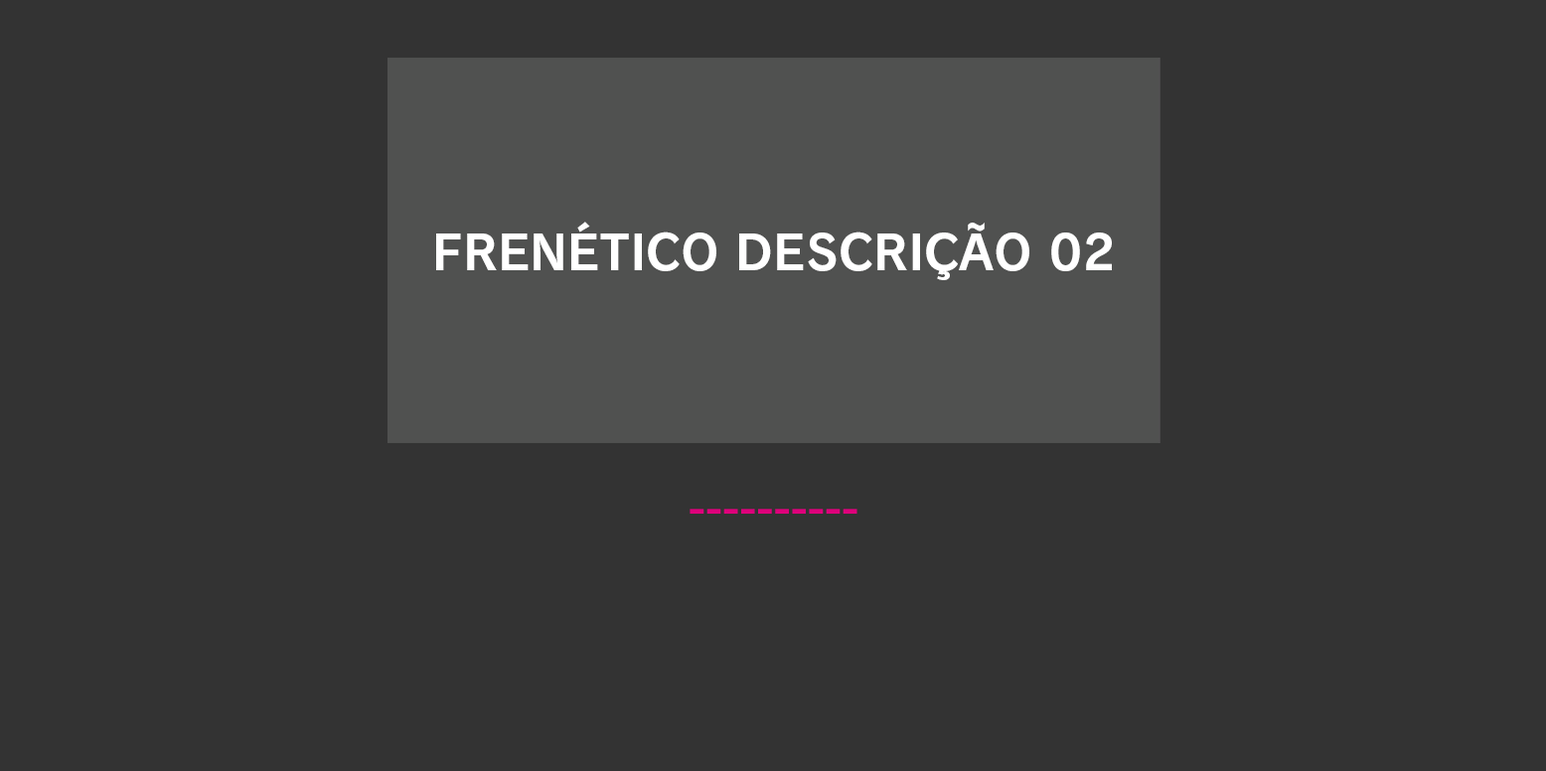
<style>
.page{position:relative;width:1546px;height:771px;background:#333333}
.page>*{position:absolute;margin:0}
.t1{font:47.7px "RodinNTLGPro-B";color:#ffffff}
</style>
<div class="page">
<p class="t1" style="left:436px;top:222px;width:676px;height:58px">FRENÉTICO DESCRIÇÃO 02</p>
</div>
